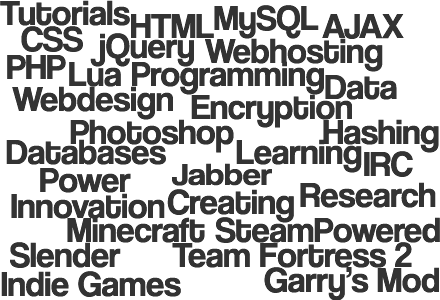
<style>
.page{position:relative;width:440px;height:300px;background:#ffffff}
.page>*{position:absolute;margin:0}
.t1{font:36px "CoolveticaRg-Regular";color:#333333}
.t2{font:31px "CoolveticaRg-Regular";color:#333333;scale:1.16 1}
</style>
<div class="page">
<p class="t1" style="left:0px;top:0px;width:130px;height:26px">Tutorials</p>
<p class="t1" style="left:214px;top:5px;width:105px;height:34px">MySQL</p>
<p class="t1" style="left:131px;top:14px;width:83px;height:24px">HTML</p>
<p class="t1" style="left:322px;top:14px;width:82px;height:25px">AJAX</p>
<p class="t1" style="left:21px;top:26px;width:62px;height:26px">CSS</p>
<p class="t1" style="left:90px;top:33px;width:104px;height:34px">jQuery</p>
<p class="t1" style="left:205px;top:38px;width:178px;height:34px">Webhosting</p>
<p class="t1" style="left:7px;top:55px;width:59px;height:24px">PHP</p>
<p class="t1" style="left:69px;top:62px;width:52px;height:25px">Lua</p>
<p class="t1" style="left:132px;top:61px;width:192px;height:34px">Programming</p>
<p class="t1" style="left:325px;top:75px;width:72px;height:25px">Data</p>
<p class="t1" style="left:12px;top:86px;width:161px;height:34px">Webdesign</p>
<p class="t1" style="left:191px;top:94px;width:161px;height:34px">Encryption</p>
<p class="t1" style="left:70px;top:119px;width:164px;height:34px">Photoshop</p>
<p class="t1" style="left:323px;top:119px;width:116px;height:34px">Hashing</p>
<p class="t1" style="left:6px;top:139px;width:160px;height:26px">Databases</p>
<p class="t1" style="left:236px;top:139px;width:126px;height:34px">Learning</p>
<p class="t1" style="left:364px;top:151px;width:49px;height:26px">IRC</p>
<p class="t1" style="left:40px;top:168px;width:91px;height:25px">Power</p>
<p class="t2" style="left:172px;top:163px;width:100px;height:23px">Jabber</p>
<p class="t1" style="left:300px;top:182px;width:136px;height:26px">Research</p>
<p class="t1" style="left:11px;top:193px;width:154px;height:26px">Innovation</p>
<p class="t1" style="left:167px;top:189px;width:127px;height:34px">Creating</p>
<p class="t1" style="left:67px;top:217px;width:138px;height:26px">Minecraft</p>
<p class="t1" style="left:215px;top:217px;width:225px;height:26px">SteamPowered</p>
<p class="t1" style="left:10px;top:242px;width:111px;height:26px">Slender</p>
<p class="t1" style="left:172px;top:242px;width:240px;height:26px">Team Fortress 2</p>
<p class="t1" style="left:264px;top:267px;width:175px;height:34px">Garry’s Mod</p>
<p class="t1" style="left:1px;top:271px;width:180px;height:26px">Indie Games</p>
</div>
